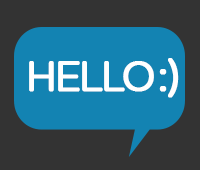
<style>
.page{position:relative;width:200px;height:170px;background:#333333}
.page>*{position:absolute;margin:0}
.t1{font:42px "VarelaRound-Regular";letter-spacing:-0.09em;color:#ffffff;font-weight:bold}
</style>
<div class="page">
<p class="t1" style="left:29px;top:58px;width:150px;height:40px">(: HELLO</p>
</div>
